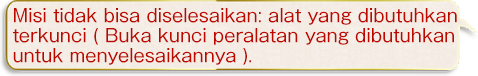
<style>
.page{position:relative;width:478px;height:76px}
.page>*{position:absolute;margin:0}
.t1{font:18px/20px "GothicMB101Pro-Regular";color:#bd0800}
</style>
<div class="page">
<p class="t1" style="left:13px;top:8px;width:444px;height:57px">Misi tidak bisa diselesaikan: alat yang dibutuhkan<br>terkunci ( Buka kunci peralatan yang dibutuhkan<br>untuk menyelesaikannya ).</p>
</div>
